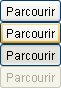
<style>
.page{position:relative;width:61px;height:88px}
.page>*{position:absolute;margin:0}
.t1{font:12px "ArialMT";letter-spacing:-0.01em;color:#000000}
.t2{font:12px "ArialMT";letter-spacing:-0.01em;color:#aca899}
</style>
<div class="page">
<p class="t1" style="left:7px;top:7px;width:48px;height:9px">Parcourir</p>
<p class="t1" style="left:7px;top:29px;width:48px;height:9px">Parcourir</p>
<p class="t1" style="left:7px;top:51px;width:48px;height:9px">Parcourir</p>
<p class="t2" style="left:7px;top:73px;width:48px;height:9px">Parcourir</p>
</div>
